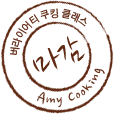
<style>
.page{position:relative;width:114px;height:114px;background:#ffffff}
.page>*{position:absolute;margin:0}
.t1{font:10.1px "RixGoM";letter-spacing:-0.025em;color:#602913}
.t2{font:39.9px "NanumBrush";letter-spacing:-0.074em;color:#602913}
.t3{font:39.9px "NanumBrush";color:#602913}
.t4{font:16.7px "NanumBrush";color:#602913}
.t5{font:16.7px "NanumBrush"}
</style>
<div class="page">
<p class="t1" style="left:10px;top:8px;width:77px;height:47px;rotate:-23deg">버라이어티 쿠킹 클래스</p>
<p class="t2" style="left:33px;top:36px;width:52px;height:36px;rotate:-23deg">마<span class="t3">감</span></p>
<p class="t4" style="left:92px;top:74px;width:7px;height:7px;rotate:-23deg">n</p>
<p class="t4" style="left:94px;top:68px;width:11px;height:6px;rotate:-23deg">g</p>
<p class="t4" style="left:81px;top:89px;width:5px;height:7px;rotate:-23deg">o</p>
<p class="t4" style="left:81px;top:84px;width:12px;height:7px;rotate:-23deg">k</p>
<p class="t4" style="left:88px;top:79px;width:7px;height:5px;rotate:-23deg">i</p>
<p class="t4" style="left:37px;top:92px;width:8px;height:13px;rotate:-23deg">A</p>
<p class="t4" style="left:46px;top:97px;width:9px;height:6px;rotate:-23deg">m</p>
<p class="t4" style="left:56px;top:97px;width:6px;height:11px;rotate:-23deg">y</p>
<p class="t4" style="left:68px;top:92px;width:7px;height:9px;rotate:-23deg">C</p>
<p class="t5" style="left:76px;top:92px;width:5px;height:7px;rotate:-23deg">o</p>
</div>
